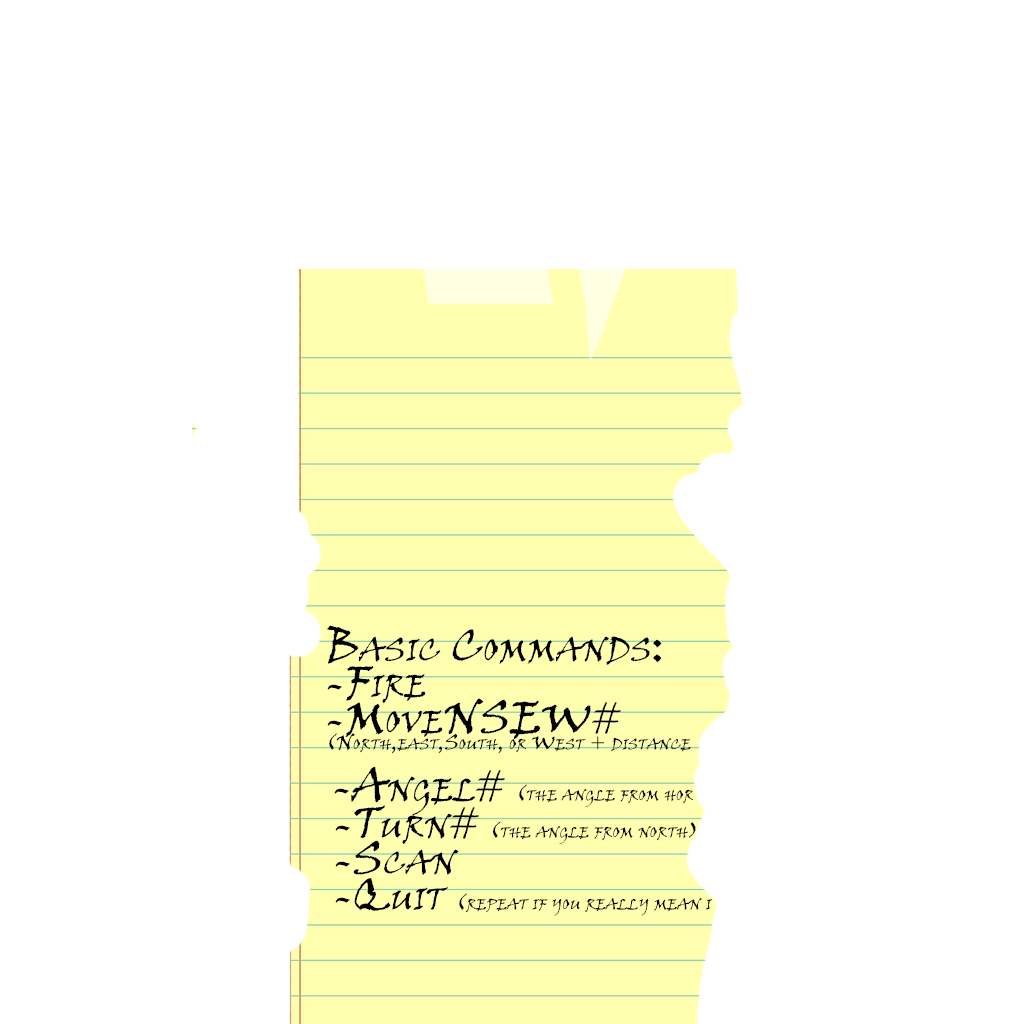
<style>
.page{position:relative;width:1024px;height:1024px;background:#ffffff}
.page>*{position:absolute;margin:0}
.t1{font:21px "VinerHandITC";color:#000000;font-variant:small-caps}
.t2{font:45px "VinerHandITC";color:#000000;font-variant:small-caps}
</style>
<div class="page">
<p class="t1" style="left:327px;top:625px;width:364px;height:128px"><span class="t2">Basic Commands:<br>-Fire<br>-MoveNSEW#<br></span>(North,east,South, or West + distance</p>
<p class="t1" style="left:334px;top:766px;width:360px;height:49px"><span class="t2">-Angel# </span>(the angle from hor</p>
<p class="t1" style="left:335px;top:805px;width:378px;height:111px"><span class="t2">-Turn# </span>(the angle from north)<br><span class="t2">-Scan<br>-Quit </span>(repeat if you really mean i</p>
</div>
